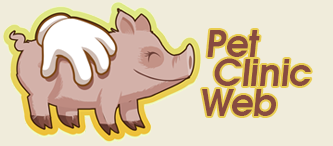
<style>
.page{position:relative;width:333px;height:146px;background:#f0ecdb}
.page>*{position:absolute;margin:0}
.t1{font:36.2px/30px "Evolventa-Bold";color:#884b40}
</style>
<div class="page">
<p class="t1" style="left:202px;top:30px;width:109px;height:86px">Pet<br>  Clinic <br> Web</p>
</div>
